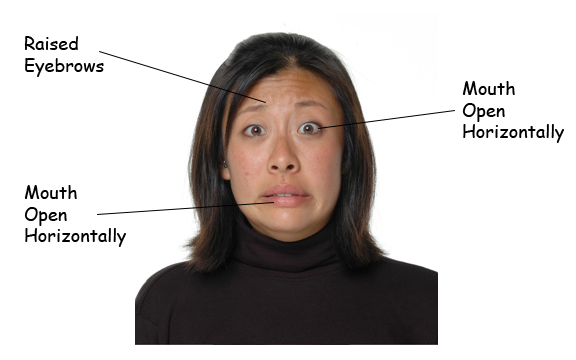
<style>
.page{position:relative;width:576px;height:360px;background:#ffffff}
.page>*{position:absolute;margin:0}
.t1{font:18px "ComicSansMS";color:#000000}
</style>
<div class="page">
<p class="t1" style="left:24px;top:36px;width:80px;height:41px">Raised<br>Eyebrows</p>
<p class="t1" style="left:462px;top:81px;width:102px;height:62px">Mouth<br>Open<br>Horizontally</p>
<p class="t1" style="left:24px;top:185px;width:102px;height:62px">Mouth<br>Open<br>Horizontally</p>
</div>
